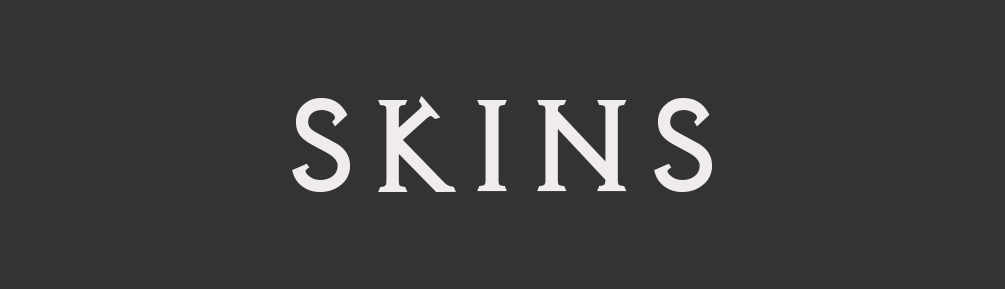
<style>
.page{position:relative;width:1005px;height:289px;background:#333333}
.page>*{position:absolute;margin:0}
.t1{font:150px "AvQest";color:#f0ecec}
</style>
<div class="page">
<p class="t1" style="left:292px;top:96px;width:420px;height:96px">SKINS</p>
</div>
